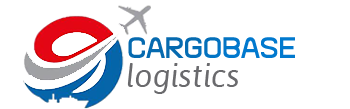
<style>
.page{position:relative;width:350px;height:109px;background:#ffffff}
.page>*{position:absolute;margin:0}
.t1{font:30px "BrainWants";color:#0373c2}
.t2{font:31.7px "Asap-Italic";color:#6a6a6d}
</style>
<div class="page">
<p class="t1" style="left:128px;top:37px;width:167px;height:21px">CARGOBASE</p>
<p class="t2" style="left:127px;top:63px;width:111px;height:31px">logistics</p>
</div>
